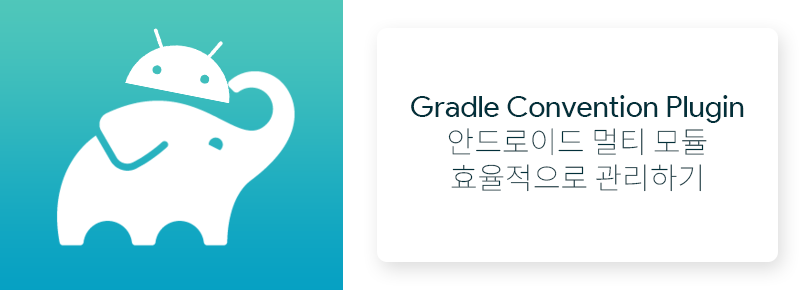
<style>
.page{position:relative;width:807px;height:290px;background:#ffffff}
.page>*{position:absolute;margin:0}
.t1{font:30px/36px "ProductSans-Regular";color:#02303a}
.t2{font:36px/48px "ProductSans-Bold";color:#073042}
.t3{font:30px/36px "NotoSansKR-Thin";color:#02303a}
</style>
<div class="page">
<p class="t1" style="left:411px;top:95px;width:333px;height:97px;text-align:center"><span class="t2"><br></span>Gradle Convention Plugin<br><span class="t3">안드로이드 멀티 모듈 <br>효율적으로 관리하기</span></p>
</div>
